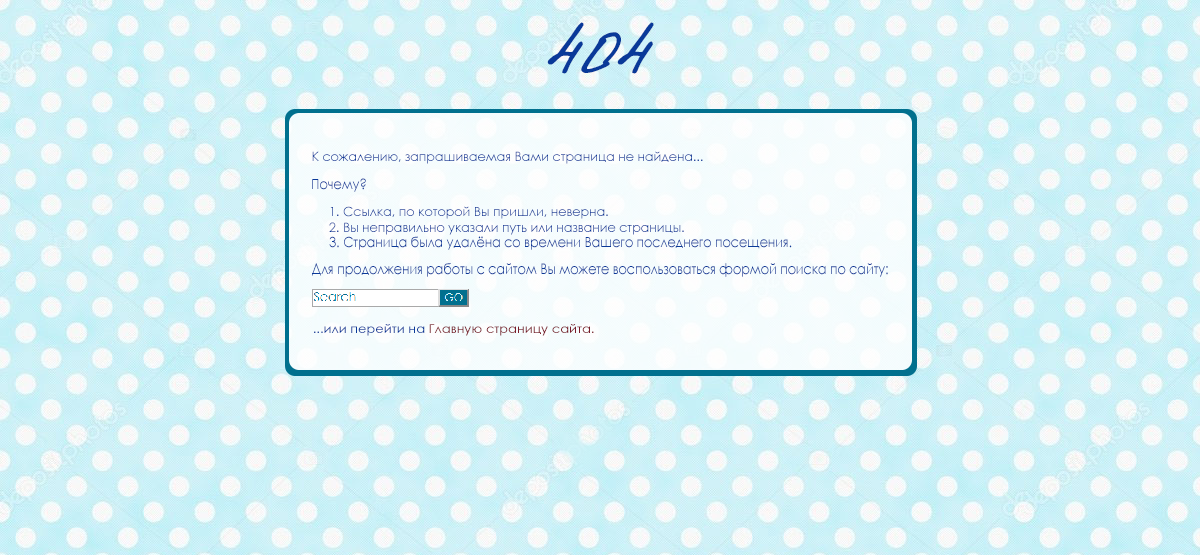
<style>
.page{position:relative;width:1200px;height:555px}
.page>*{position:absolute;margin:0}
.t1{font:84.7px "Katherine-Plus";color:#093999;scale:1.05 1}
.t2{font:12.7px "CenturyGothic";color:#093999}
.t3{font:13.9px "CenturyGothic";color:#093999;scale:0.9 1}
.t4{font:12.4px "CenturyGothic";color:#093999}
.t5{font:13.1px "CenturyGothic";color:#093999;scale:0.96 1}
.t6{font:14px "CenturyGothic";color:#093999;scale:0.89 1}
.t7{font:14.8px "CenturyGothic";color:#093999;scale:0.85 1}
.t8{font:12.2px "CenturyGothic";color:#7a1b29;scale:1.06 1}
.t9{font:12.2px "CenturyGothic";color:#093999;scale:1.06 1}
</style>
<div class="page">
<p class="t1" style="left:547px;top:22px;width:107px;height:52px">404</p>
<p class="t2" style="left:312px;top:151px;width:391px;height:13px">К сожалению, запрашиваемая Вами страница не найдена...</p>
<p class="t3" style="left:312px;top:178px;width:54px;height:14px">Почему?</p>
<p class="t4" style="left:330px;top:206px;width:278px;height:13px">1. Ссылка, по которой Вы пришли, неверна.</p>
<p class="t5" style="left:329px;top:222px;width:355px;height:13px">2. Вы неправильно указали путь или название страницы.</p>
<p class="t6" style="left:329px;top:236px;width:463px;height:14px">3. Страница была удалёна со времени Вашего последнего посещения.</p>
<p class="t7" style="left:312px;top:263px;width:576px;height:14px">Для продолжения работы с сайтом Вы можете воспользоваться формой поиска по сайту:</p>
<p class="t8" style="left:314px;top:324px;width:280px;height:12px"><span class="t9">...или перейти на </span>Главную страницу сайта.</p>
</div>
